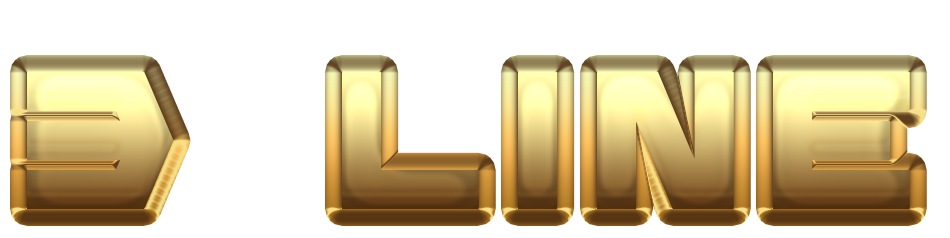
<style>
.page{position:relative;width:950px;height:238px;background:#ffffff}
.page>*{position:absolute;margin:0}
.t1{font:200px "Diagon";letter-spacing:0.15em}
</style>
<div class="page">
<p class="t1" style="left:27px;top:72px;width:883px;height:137px">3  LINE</p>
</div>
